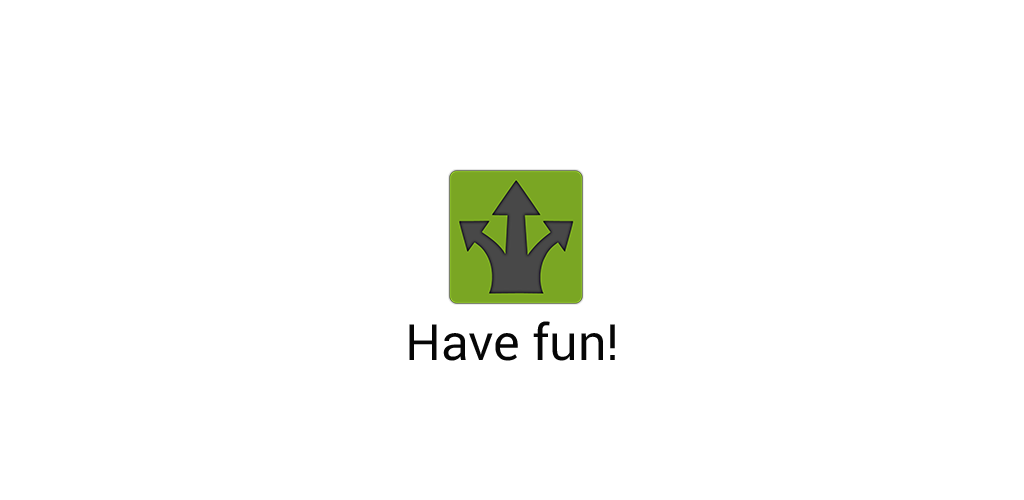
<style>
.page{position:relative;width:1024px;height:500px;background:#ffffff}
.page>*{position:absolute;margin:0}
.t1{font:50px "Roboto-Regular";color:#060606}
</style>
<div class="page">
<p class="t1" style="left:409px;top:321px;width:206px;height:40px">Have fun!</p>
</div>
